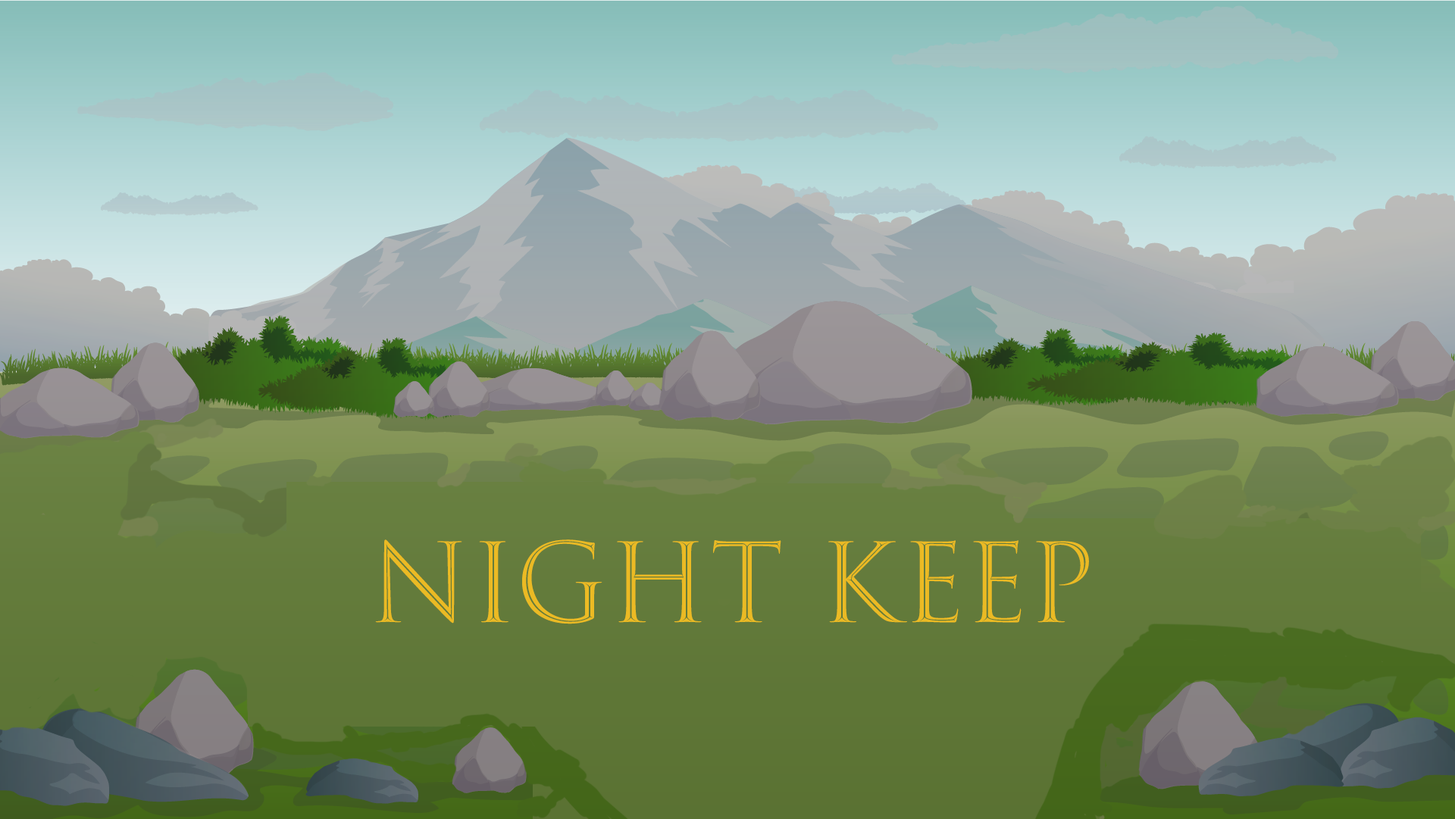
<style>
.page{position:relative;width:1455px;height:819px}
.page>*{position:absolute;margin:0}
.t1{font:106.9px "TrajanColor-Concept";color:#ebba24}
</style>
<div class="page">
<p class="t1" style="left:375px;top:540px;width:714px;height:85px">NIGHT KEEP</p>
</div>
